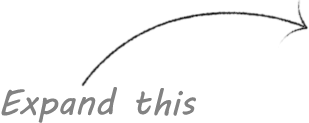
<style>
.page{position:relative;width:309px;height:123px;background:#ffffff}
.page>*{position:absolute;margin:0}
.t1{font:36px "MVBoli";color:#828282}
</style>
<div class="page">
<p class="t1" style="left:1px;top:87px;width:195px;height:36px">Expand this</p>
</div>
